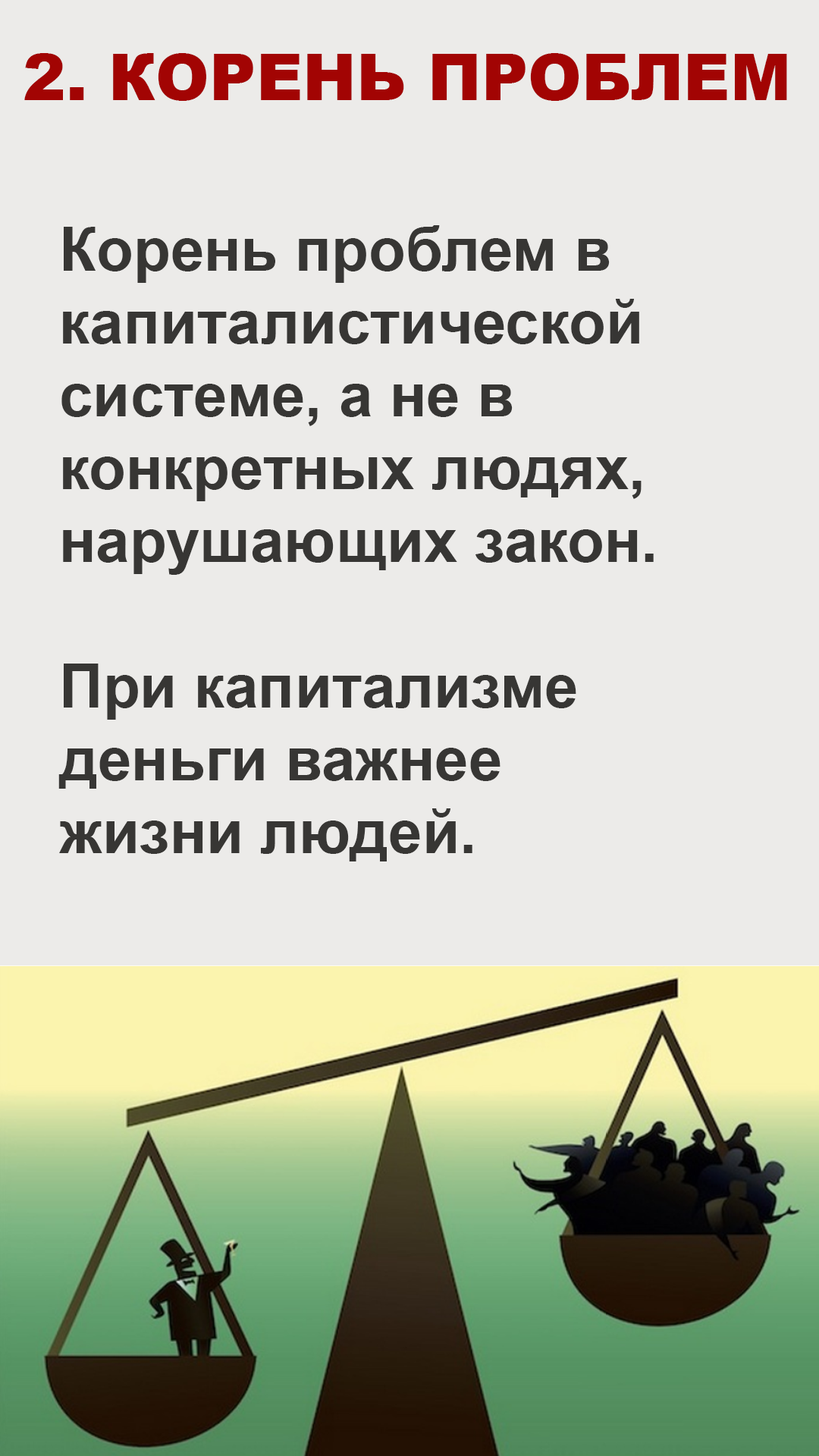
<style>
.page{position:relative;width:819px;height:1456px;background:#ecebe9}
.page>*{position:absolute;margin:0}
.t1{font:64.5px "Arial-Black";color:#a20403}
.t2{font:60.7px "Arial-BoldMT";color:#373634}
</style>
<div class="page">
<p class="t1" style="left:24px;top:53px;width:763px;height:48px">2. КОРЕНЬ ПРОБЛЕМ</p>
<p class="t2" style="left:58px;top:225px;width:596px;height:636px">Корень проблем в <br>капиталистической<br>системе, а не в <br>конкретных людях, <br>нарушающих закон.<br><br>При капитализме<br>деньги важнее<br>жизни людей.</p>
</div>
